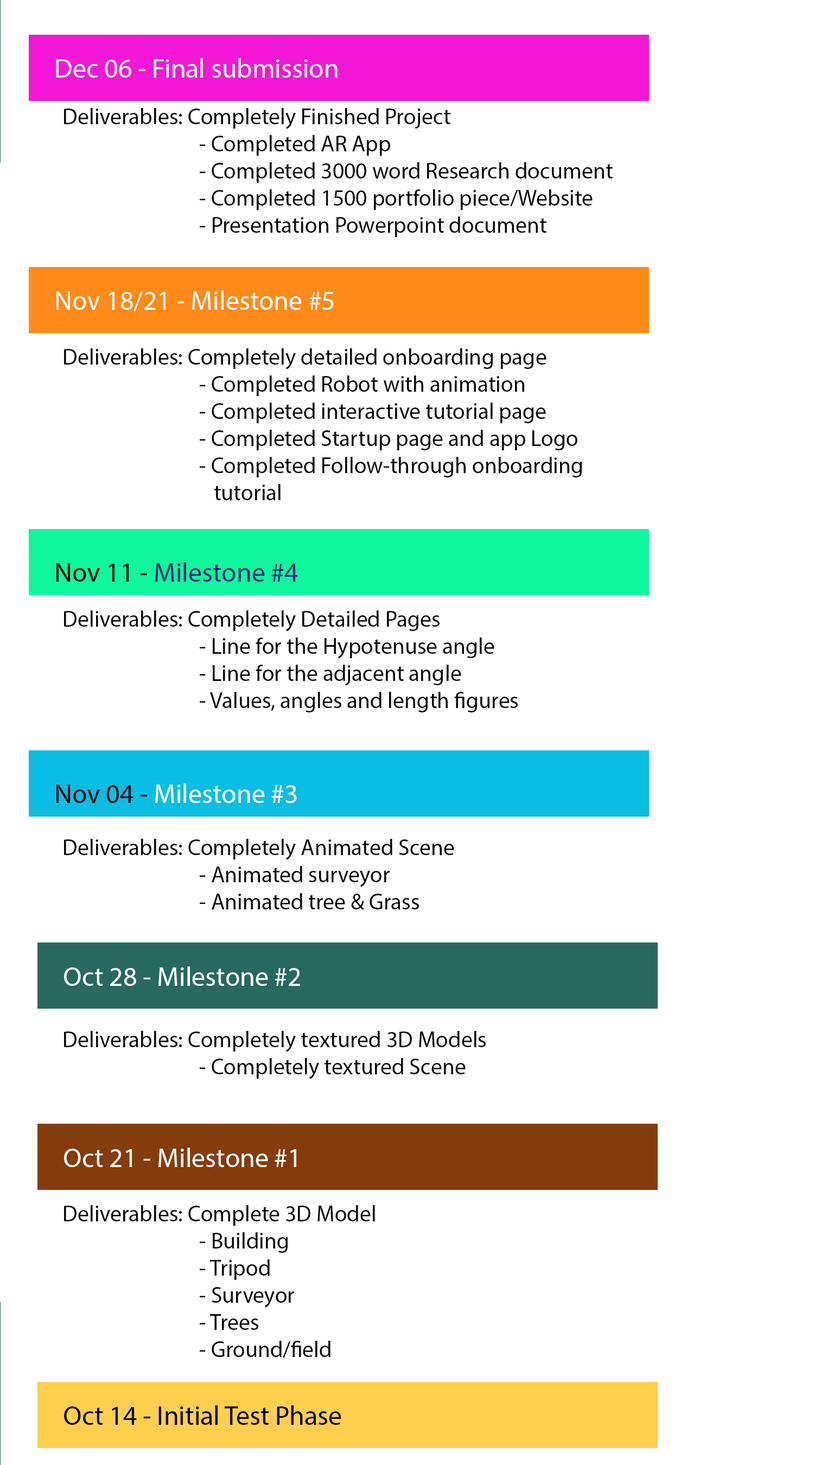
<style>
.page{position:relative;width:814px;height:1465px;background:#ffffff}
.page>*{position:absolute;margin:0}
.t1{font:27.1px "MyriadPro-Regular";color:#ffffff}
.t2{font:22.6px "MyriadPro-Regular";color:#070707}
.t3{font:27.1px "MyriadPro-Regular";color:#fffefe}
.t4{font:27.1px "MyriadPro-Regular";color:#0c2c75}
.t5{font:27.1px "MyriadPro-Regular";color:#000000}
</style>
<div class="page">
<p class="t1" style="left:56px;top:58px;width:282px;height:20px">Dec 06 - Final submission</p>
<p class="t2" style="left:64px;top:108px;width:549px;height:129px">Deliverables: Completely Finished Project<br>       - Completed AR App<br>       - Completed 3000 word Research document<br>       - Completed 1500 portfolio piece/Website<br>       - Presentation Powerpoint document</p>
<p class="t1" style="left:56px;top:290px;width:278px;height:21px"><span class="t3">Nov 18/21 - </span>Milestone #5</p>
<p class="t2" style="left:64px;top:348px;width:518px;height:152px">Deliverables: Completely detailed onboarding page<br>       - Completed Robot with animation<br>       - Completed interactive tutorial page<br>       - Completed Startup page and app Logo<br>       - Completed Follow-through onboarding<br>          tutorial</p>
<p class="t4" style="left:56px;top:562px;width:242px;height:20px"><span class="t5">Nov 11 - </span>Milestone #4</p>
<p class="t2" style="left:64px;top:610px;width:454px;height:102px">Deliverables: Completely Detailed Pages<br>       - Line for the Hypotenuse angle<br>       - Line for the adjacent angle<br>       - Values, angles and length figures</p>
<p class="t1" style="left:56px;top:784px;width:241px;height:19px"><span class="t5">Nov 04 - </span>Milestone #3</p>
<p class="t2" style="left:64px;top:839px;width:390px;height:70px">Deliverables: Completely Animated Scene<br>       - Animated surveyor<br>       - Animated tree &amp; Grass</p>
<p class="t1" style="left:64px;top:966px;width:236px;height:20px">Oct 28 - Milestone #2</p>
<p class="t2" style="left:64px;top:1031px;width:422px;height:48px">Deliverables: Completely textured 3D Models<br>       - Completely textured Scene</p>
<p class="t1" style="left:64px;top:1148px;width:232px;height:19px">Oct 21 - Milestone #1</p>
<p class="t2" style="left:64px;top:1205px;width:311px;height:153px">Deliverables: Complete 3D Model<br>       - Building<br>       - Tripod<br>       - Surveyor<br>       - Trees<br>       - Ground/field</p>
<p class="t5" style="left:64px;top:1405px;width:277px;height:20px">Oct 14 - Initial Test Phase</p>
</div>
